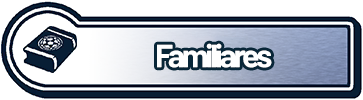
<style>
.page{position:relative;width:363px;height:100px;background:#ffffff}
.page>*{position:absolute;margin:0}
.t1{font:32px "Barlow-Bold";letter-spacing:-0.1em;color:#ffffff}
</style>
<div class="page">
<p class="t1" style="left:157px;top:43px;width:115px;height:25px">Familiares</p>
</div>
